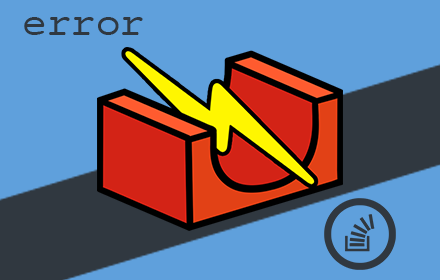
<style>
.page{position:relative;width:440px;height:280px;background:#5fa0dc}
.page>*{position:absolute;margin:0}
.t1{font:9.8px "Courier";color:#303840}
</style>
<div class="page">
<p class="t1" style="left:24px;top:17px;width:119px;height:18px;text-align:center">error</p>
</div>
